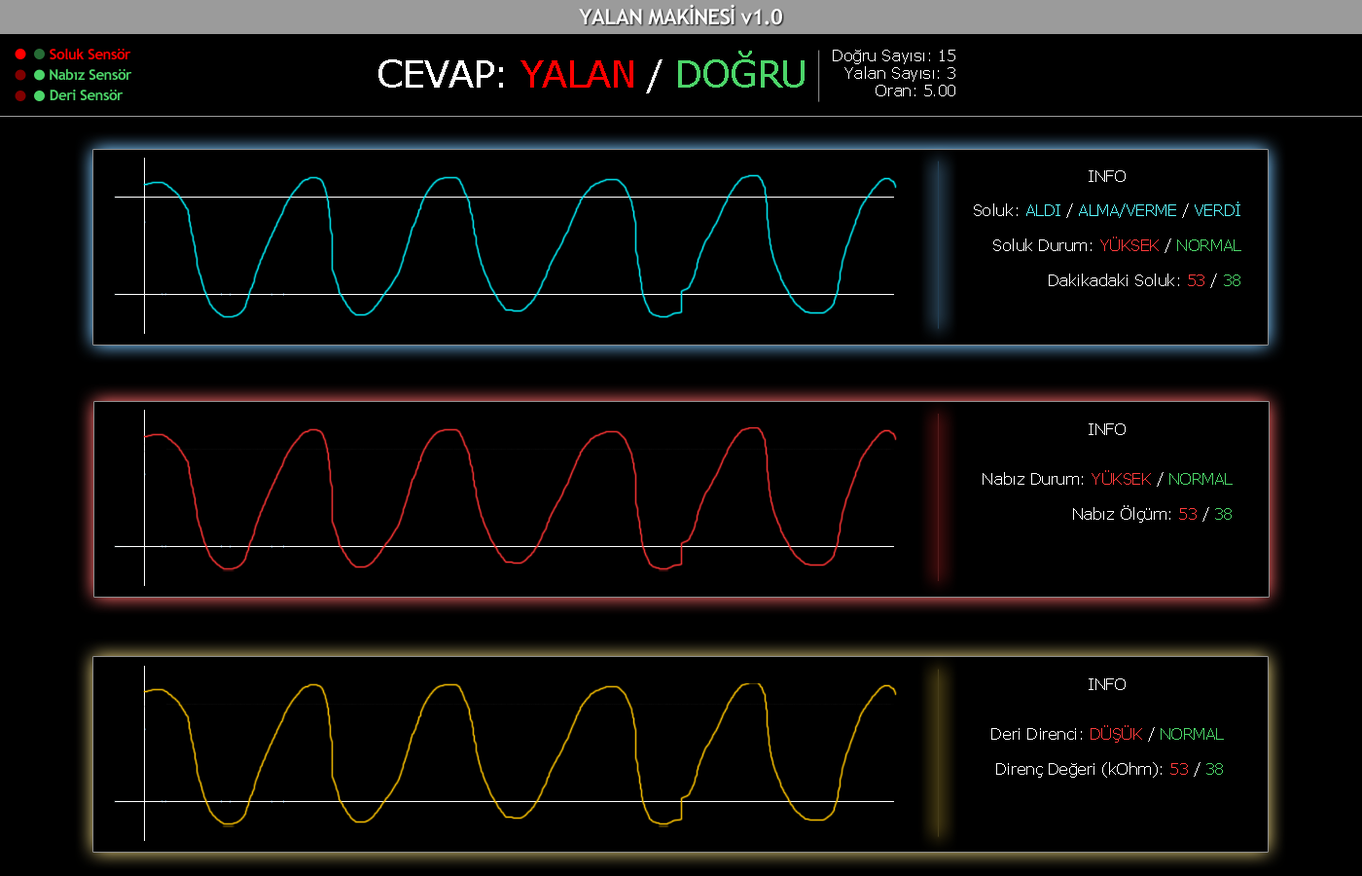
<style>
.page{position:relative;width:1362px;height:876px;background:#000000}
.page>*{position:absolute;margin:0}
.t1{font:21.4px "TrebuchetMS-Bold";letter-spacing:-0.03em;color:#ffffff}
.t2{font:14.6px "TrebuchetMS-Bold";letter-spacing:-0.03em;color:#ff0000}
.t3{font:37px "Verdana";letter-spacing:-0.03em;color:#ffffff}
.t4{font:37px "Verdana";letter-spacing:-0.03em;color:#fe0000}
.t5{font:37px "Verdana";letter-spacing:-0.03em;color:#4cd569}
.t6{font:15.6px/17.5px "Verdana";letter-spacing:-0.03em;color:#ffffff}
.t7{font:14.6px "TrebuchetMS-Bold";letter-spacing:-0.03em;color:#4cd569}
.t8{font:15.6px "Verdana";letter-spacing:-0.03em;color:#ffffff}
.t9{font:15.6px/17.5px "Verdana";letter-spacing:-0.03em;color:#5af9ff}
.t10{font:15.6px/17.5px "Verdana";letter-spacing:-0.03em;color:#ff3b3b}
.t11{font:15.6px/17.5px "Verdana";letter-spacing:-0.03em;color:#4cd569}
</style>
<div class="page">
<p class="t1" style="left:579px;top:4px;width:203px;height:21px">YALAN MAKİNESİ v1.0</p>
<p class="t2" style="left:50px;top:48px;width:81px;height:11px">Soluk Sensör</p>
<p class="t3" style="left:378px;top:51px;width:427px;height:42px">CEVAP: <span class="t4">YALAN</span> / <span class="t5">DOĞRU</span></p>
<p class="t6" style="left:833px;top:50px;width:122px;height:46px;text-align:right">Doğru Sayısı: 15<br>Yalan Sayısı: 3<br>Oran: 5.00</p>
<p class="t7" style="left:50px;top:68px;width:82px;height:12px">Nabız Sensör</p>
<p class="t7" style="left:50px;top:89px;width:74px;height:11px">Deri Sensör</p>
<p class="t8" style="left:1089px;top:170px;width:37px;height:12px">INFO</p>
<p class="t6" style="left:974px;top:201px;width:267px;height:87px;text-align:right">Soluk: <span class="t9">ALDI </span>/<span class="t9"> ALMA/VERME </span>/<span class="t9"> VERDİ<br><br></span>Soluk Durum: <span class="t10">YÜKSEK </span>/ <span class="t11">NORMAL<br></span><br>Dakikadaki Soluk: <span class="t10">53 </span>/ <span class="t11">38</span></p>
<p class="t8" style="left:1089px;top:423px;width:37px;height:12px">INFO</p>
<p class="t6" style="left:983px;top:470px;width:250px;height:52px;text-align:right">Nabız Durum: <span class="t10">YÜKSEK </span>/ <span class="t11">NORMAL<br></span><br>Nabız Ölçüm: <span class="t10">53 </span>/ <span class="t11">38</span></p>
<p class="t8" style="left:1089px;top:678px;width:37px;height:12px">INFO</p>
<p class="t6" style="left:991px;top:725px;width:233px;height:52px;text-align:right">Deri Direnci: <span class="t10">DÜŞÜK </span>/ <span class="t11">NORMAL<br></span><br>Direnç Değeri (kOhm): <span class="t10">53 </span>/ <span class="t11">38</span></p>
</div>
